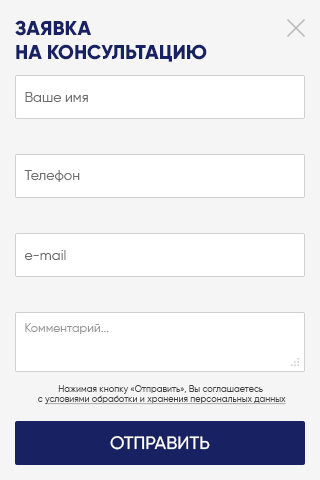
<style>
.page{position:relative;width:320px;height:480px;background:#f5f5f5}
.page>*{position:absolute;margin:0}
.t1{font:20px "Gilroy-Extrabold";color:#182263;text-transform:uppercase}
.t2{font:14px "Gilroy-Regular";color:#6d6d6d}
.t3{font:12px "Gilroy-Regular";color:#979797}
.t4{font:9px "Gilroy-Regular";color:#424242;text-decoration:underline}
.t5{font:9px "Gilroy-Regular";color:#424242}
.t6{font:18px "Gilroy-Medium";color:#ffffff;text-transform:uppercase}
</style>
<div class="page">
<p class="t1" style="left:15px;top:20px;width:192px;height:42px">заявка <br>на КОНСУЛЬТАЦИЮ</p>
<p class="t2" style="left:25px;top:92px;width:63px;height:10px">Ваше имя</p>
<p class="t2" style="left:24px;top:170px;width:56px;height:12px">Телефон</p>
<p class="t2" style="left:25px;top:250px;width:41px;height:10px">e-mail</p>
<p class="t3" style="left:25px;top:323px;width:84px;height:11px">Комментарий...</p>
<p class="t4" style="left:38px;top:385px;width:248px;height:20px;text-align:center"><span class="t5">Нажимая кнопку «Отправить», Вы соглашаетесь <br>с </span>условиями обработки и хранения персональных данных</p>
<p class="t6" style="left:110px;top:436px;width:100px;height:14px">ОТПРАВИТЬ</p>
</div>
